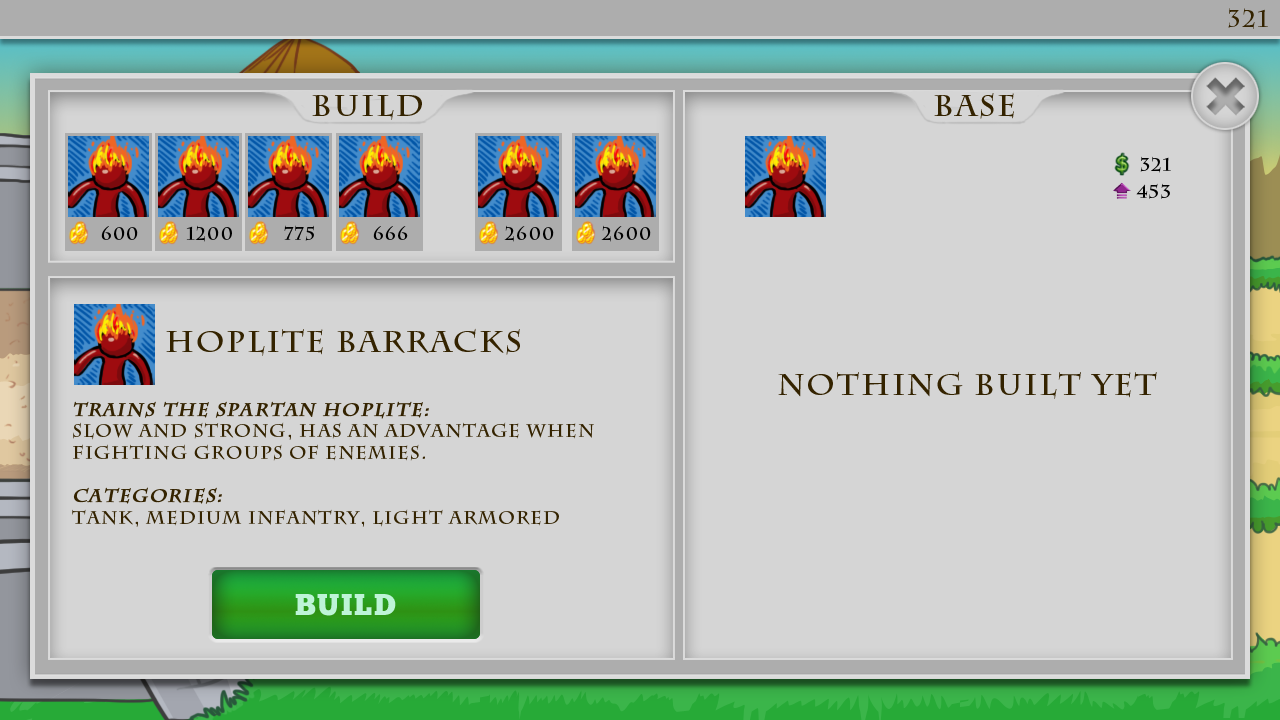
<style>
.page{position:relative;width:1280px;height:720px;background:#d5d5d5}
.page>*{position:absolute;margin:0}
.t1{font:23.7px "CharlemagneStd-Bold";letter-spacing:0.06em;color:#342300}
.t2{font:30px "CharlemagneStd-Bold";letter-spacing:0.06em;color:#342300}
.t3{font:18px "CharlemagneStd-Bold";letter-spacing:0.06em;color:#000000}
.t4{font:18px "CharlemagneStd-Bold";letter-spacing:0.06em;color:#342300}
.t5{font:18px "CharlemagneStd-Bold";letter-spacing:0.06em;color:#342300;font-weight:bold;font-style:italic}
.t6{font:30px "ChunkFive-Roman";letter-spacing:0.06em;color:#bdf4d7}
</style>
<div class="page">
<p class="t1" style="left:1228px;top:8px;width:40px;height:21px">321</p>
<p class="t2" style="left:312px;top:95px;width:110px;height:25px">Build</p>
<p class="t2" style="left:934px;top:93px;width:80px;height:26px">Base</p>
<p class="t3" style="left:1140px;top:156px;width:31px;height:17px">321</p>
<p class="t3" style="left:1136px;top:183px;width:34px;height:16px">453</p>
<p class="t3" style="left:101px;top:226px;width:37px;height:14px">600</p>
<p class="t3" style="left:186px;top:225px;width:46px;height:17px">1200</p>
<p class="t3" style="left:284px;top:225px;width:30px;height:16px">775</p>
<p class="t3" style="left:373px;top:226px;width:35px;height:14px">666</p>
<p class="t3" style="left:504px;top:225px;width:50px;height:17px">2600</p>
<p class="t3" style="left:601px;top:225px;width:50px;height:17px">2600</p>
<p class="t2" style="left:166px;top:328px;width:354px;height:28px">Hoplite Barracks</p>
<p class="t2" style="left:778px;top:371px;width:379px;height:28px">Nothing built yet</p>
<p class="t4" style="left:72px;top:401px;width:522px;height:126px"><span class="t5">Trains the spartan Hoplite:<br></span>Slow and strong, has an advantage when <br>fighting groups of enemies.<br><br><span class="t5">Categories: <br></span>Tank, medium infantry, Light armored</p>
<p class="t6" style="left:295px;top:594px;width:101px;height:22px">BUILD</p>
</div>
